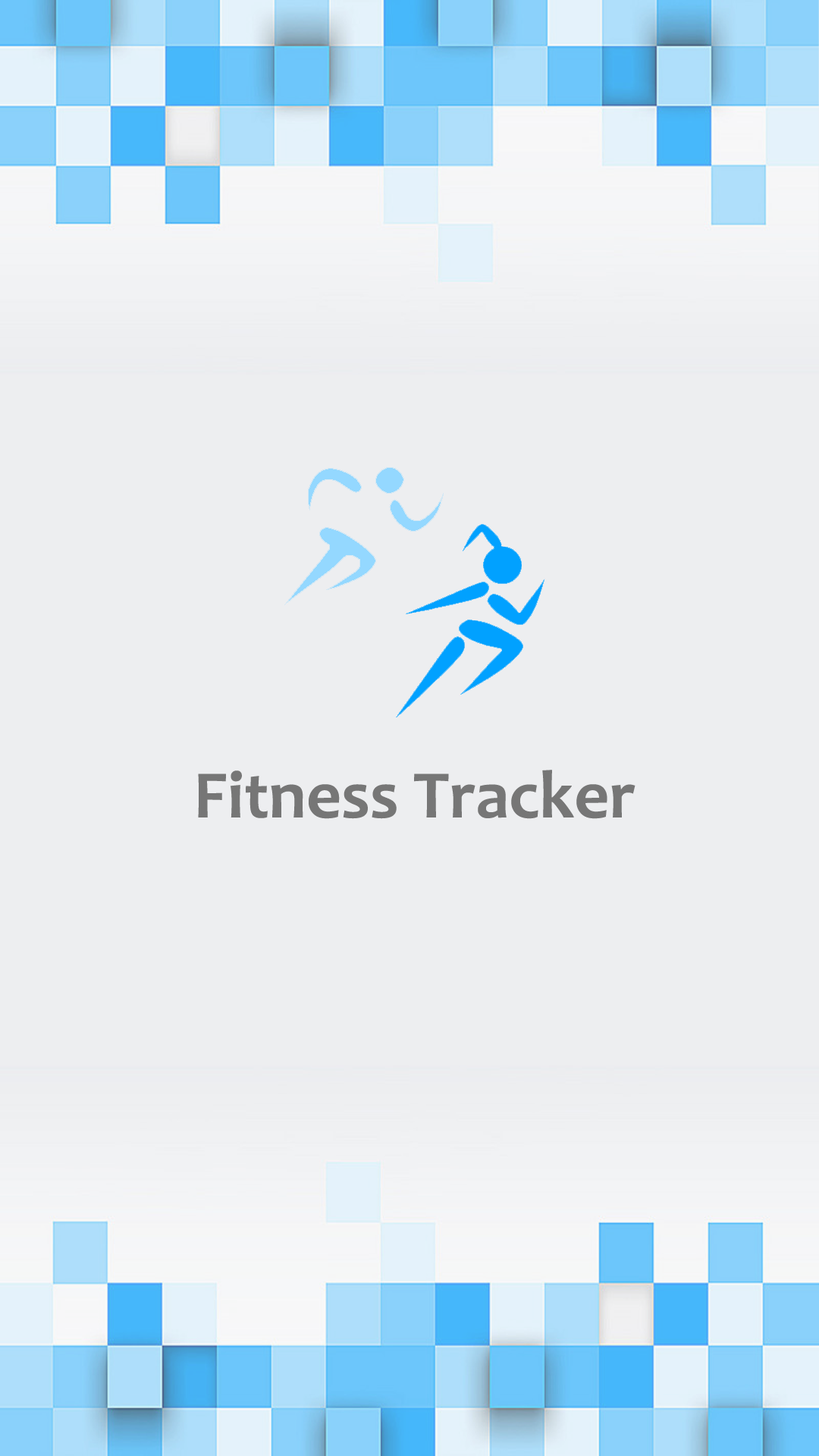
<style>
.page{position:relative;width:819px;height:1456px;background:#edeef0}
.page>*{position:absolute;margin:0}
.t1{font:68.2px "Candara-Bold";color:#767676}
</style>
<div class="page">
<p class="t1" style="left:198px;top:770px;width:437px;height:49px">Fitness Tracker</p>
</div>
